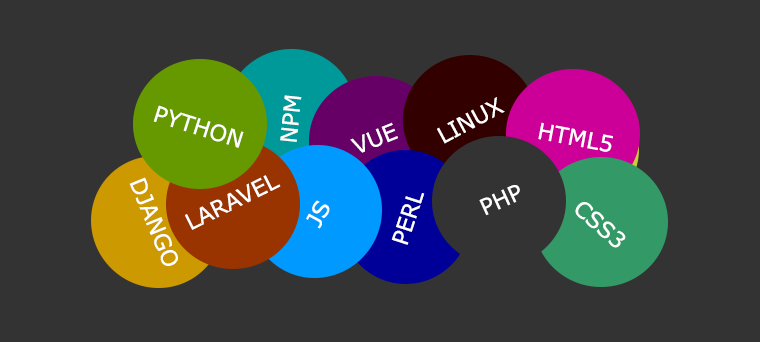
<style>
.page{position:relative;width:760px;height:342px;background:#333333}
.page>*{position:absolute;margin:0}
.t1{font:22.4px "Verdana";color:#ffffff}
</style>
<div class="page">
<p class="t1" style="left:280px;top:95px;width:22px;height:47px;rotate:-84deg">NPM</p>
<p class="t1" style="left:437px;top:97px;width:68px;height:47px;rotate:-28deg">LINUX</p>
<p class="t1" style="left:153px;top:105px;width:91px;height:43px;rotate:17deg">PYTHON</p>
<p class="t1" style="left:350px;top:122px;width:48px;height:31px;rotate:-22deg">VUE</p>
<p class="t1" style="left:538px;top:122px;width:75px;height:30px;rotate:11deg">HTML5</p>
<p class="t1" style="left:129px;top:177px;width:49px;height:89px;rotate:68deg">DJANGO</p>
<p class="t1" style="left:185px;top:175px;width:96px;height:55px;rotate:-26deg">LARAVEL</p>
<p class="t1" style="left:479px;top:185px;width:41px;height:31px;rotate:-24deg">PHP</p>
<p class="t1" style="left:391px;top:193px;width:34px;height:52px;rotate:-72deg">PERL</p>
<p class="t1" style="left:306px;top:200px;width:24px;height:29px;rotate:-61deg">JS</p>
<p class="t1" style="left:575px;top:202px;width:51px;height:46px;rotate:41deg">CSS3</p>
</div>
